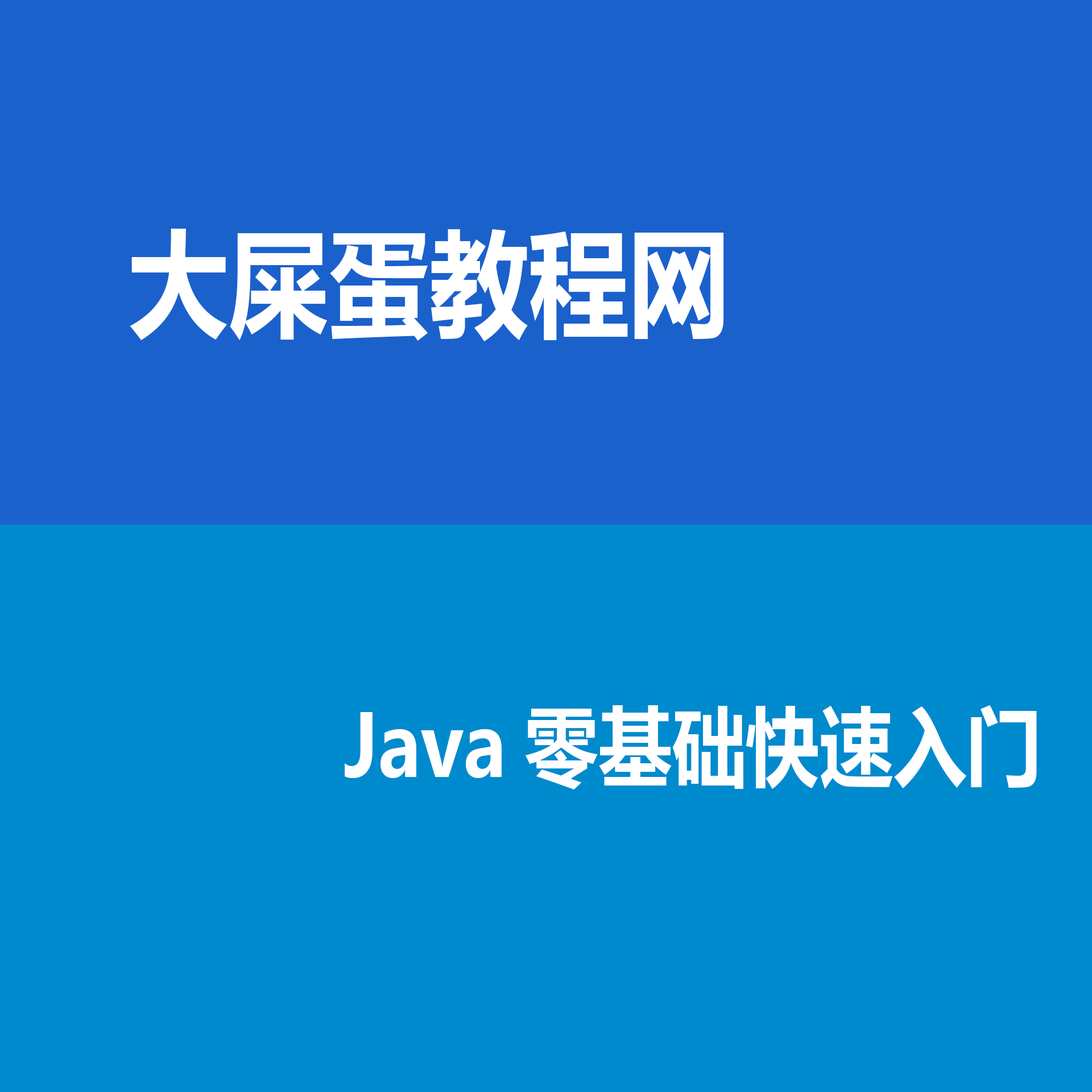
<style>
.page{position:relative;width:1092px;height:1092px;background:#008ace}
.page>*{position:absolute;margin:0}
.t1{font:116.1px "MicrosoftYaHei-Bold";color:#ffffff;scale:0.86 1}
.t2{font:85.9px "MicrosoftYaHei-Bold";color:#ffffff;scale:0.86 1}
</style>
<div class="page">
<p class="t1" style="left:130px;top:229px;width:594px;height:112px">大屎蛋教程网</p>
<p class="t2" style="left:345px;top:705px;width:692px;height:84px">Java零基础快速入门</p>
</div>
